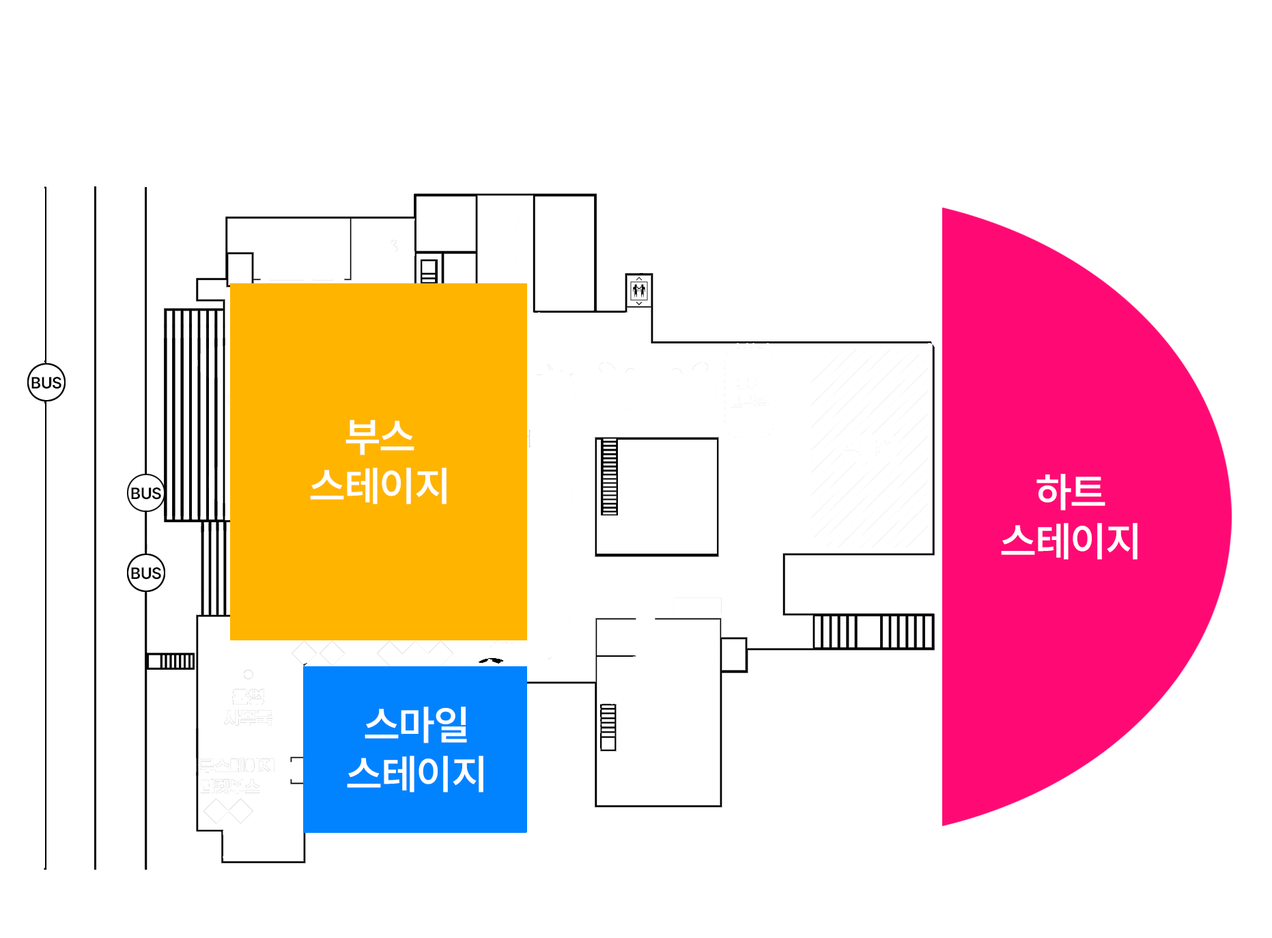
<style>
.page{position:relative;width:1272px;height:938px;background:#ffffff}
.page>*{position:absolute;margin:0}
.t1{font:16.2px "Pretendard-SemiBold";color:#000000}
.t2{font:41px "Pretendard-SemiBold";color:#ffffff}
</style>
<div class="page">
<p class="t1" style="left:31px;top:377px;width:30px;height:12px">BUS</p>
<p class="t2" style="left:310px;top:420px;width:136px;height:84px;text-align:center">부스<br>스테이지</p>
<p class="t2" style="left:1001px;top:474px;width:136px;height:86px;text-align:center">하트<br>스테이지</p>
<p class="t1" style="left:131px;top:487px;width:30px;height:13px">BUS</p>
<p class="t1" style="left:131px;top:567px;width:30px;height:12px">BUS</p>
<p class="t2" style="left:347px;top:706px;width:136px;height:86px;text-align:center">스마일<br>스테이지</p>
</div>
